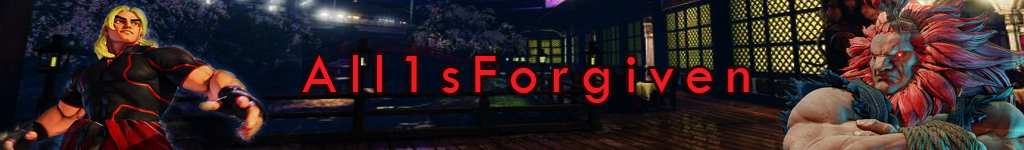
<style>
.page{position:relative;width:1024px;height:150px}
.page>*{position:absolute;margin:0}
.t1{font:58.3px "TwCenMT-Regular";letter-spacing:0.2em;color:#ed1c24}
</style>
<div class="page">
<p class="t1" style="left:302px;top:55px;width:447px;height:48px">All1sForgiven</p>
</div>
